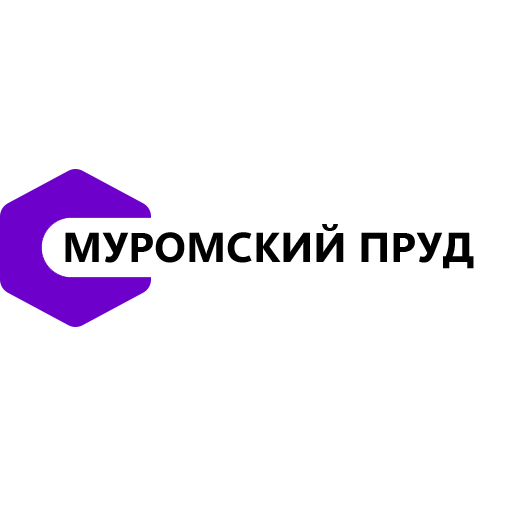
<style>
.page{position:relative;width:512px;height:512px;background:#ffffff}
.page>*{position:absolute;margin:0}
.t1{font:41.7px "SegoeUIVariable-BoldSmall";color:#000000}
</style>
<div class="page">
<p class="t1" style="left:65px;top:224px;width:409px;height:45px">МУРОМСКИЙ ПРУД</p>
</div>
